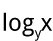
<style>
.page{position:relative;width:53px;height:41px;background:#ffffff}
.page>*{position:absolute;margin:0}
.t1{font:23.7px "DroidSans";color:#000000}
.t2{font:13.4px "DroidSans";color:#000000}
</style>
<div class="page">
<p class="t1" style="left:3px;top:12px;width:49px;height:25px">log x</p>
<p class="t2" style="left:34px;top:30px;width:8px;height:11px">y</p>
</div>
